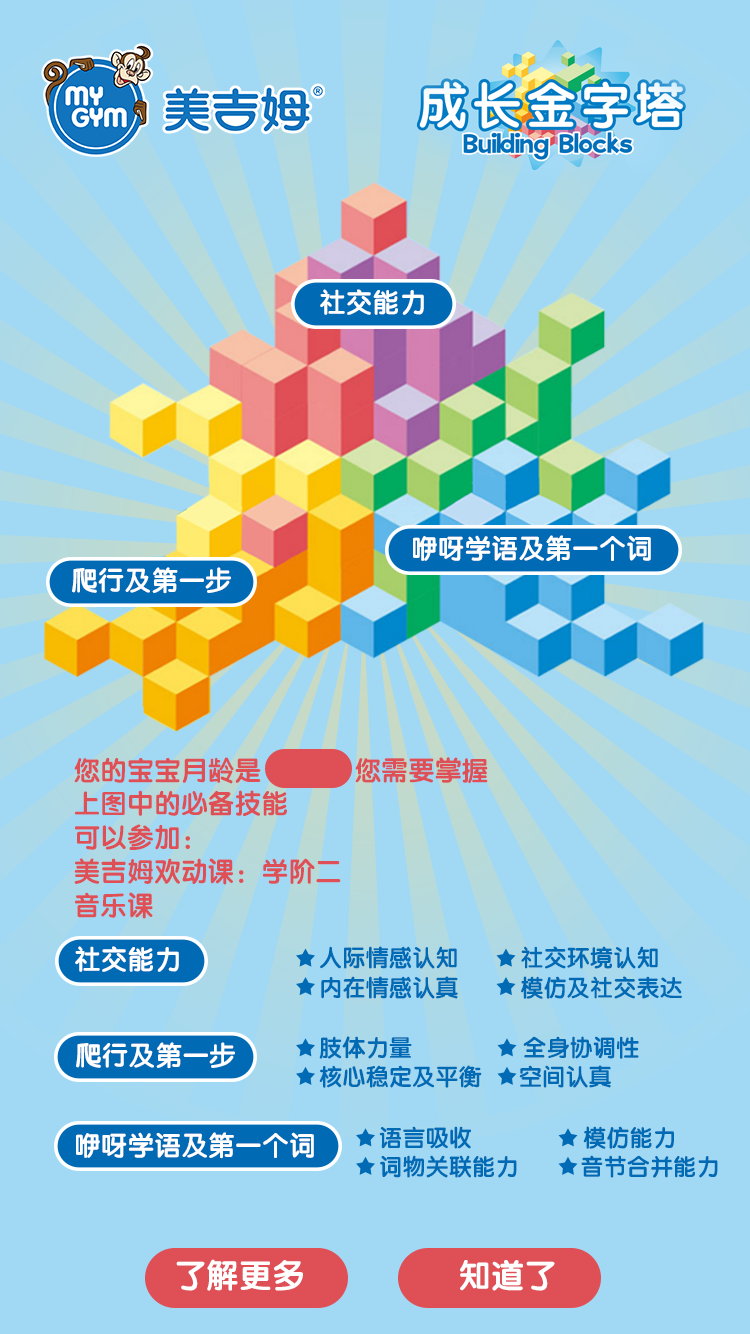
<style>
.page{position:relative;width:750px;height:1334px;background:#a1d9f5}
.page>*{position:absolute;margin:0}
.t1{font:27.2px "FZY4JW--GB1-0";color:#ffffff}
.t2{font:27.2px/39.4px "FZY4JW--GB1-0";color:#df4f56}
.t3{font:23.5px/34px "FZY4JW--GB1-0";color:#006ab4}
.t4{font:33px "FZY4JW--GB1-0";color:#ffffff}
</style>
<div class="page">
<p class="t1" style="left:320px;top:289px;width:104px;height:26px">社交能力</p>
<p class="t1" style="left:413px;top:535px;width:238px;height:27px">咿呀学语及第一个词</p>
<p class="t1" style="left:72px;top:567px;width:159px;height:27px">爬行及第一步</p>
<p class="t2" style="left:74px;top:757px;width:414px;height:162px">您的宝宝月龄是             您需要掌握<br>上图中的必备技能<br>可以参加：<br>美吉姆欢动课：学阶二<br>音乐课</p>
<p class="t1" style="left:75px;top:946px;width:104px;height:26px">社交能力</p>
<p class="t3" style="left:320px;top:946px;width:362px;height:53px">人际情感认知          社交环境认知<br>内在情感认真          模仿及社交表达</p>
<p class="t3" style="left:319px;top:1036px;width:320px;height:52px">肢体力量                  全身协调性<br>核心稳定及平衡      空间认真</p>
<p class="t1" style="left:76px;top:1042px;width:159px;height:27px">爬行及第一步</p>
<p class="t1" style="left:76px;top:1132px;width:238px;height:27px">咿呀学语及第一个词</p>
<p class="t3" style="left:379px;top:1126px;width:339px;height:52px">语言吸收                  模仿能力<br>词物关联能力          音节合并能力</p>
<p class="t4" style="left:176px;top:1259px;width:127px;height:32px">了解更多</p>
<p class="t4" style="left:460px;top:1260px;width:95px;height:31px">知道了</p>
</div>
